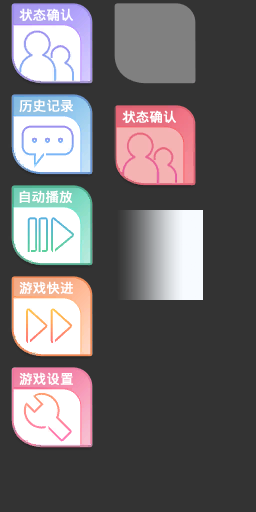
<style>
.page{position:relative;width:256px;height:512px;background:#333333}
.page>*{position:absolute;margin:0}
.t1{font:13.3px "WenQuanYiMicroHeiMono";color:#ffffff;font-weight:bold}
</style>
<div class="page">
<p class="t1" style="left:19px;top:8px;width:54px;height:13px">状态确认</p>
<p class="t1" style="left:19px;top:99px;width:54px;height:13px">历史记录</p>
<p class="t1" style="left:122px;top:110px;width:54px;height:13px">状态确认</p>
<p class="t1" style="left:19px;top:190px;width:53px;height:13px">自动播放</p>
<p class="t1" style="left:19px;top:281px;width:54px;height:13px">游戏快进</p>
<p class="t1" style="left:19px;top:372px;width:54px;height:13px">游戏设置</p>
</div>
